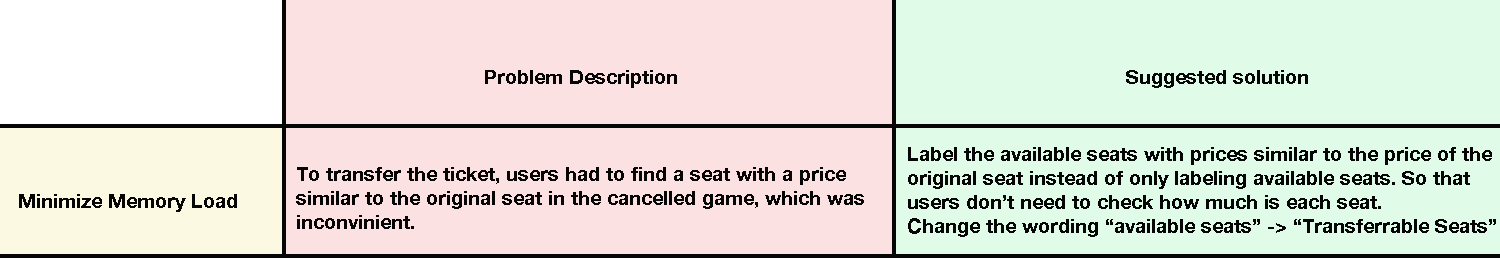
<style>
.page{position:relative;width:1500px;height:258px;background:#fbe1e2}
.page>*{position:absolute;margin:0}
.t1{font:20px "HelveticaNeue-Bold";color:#060606}
</style>
<div class="page">
<p class="t1" style="left:485px;top:70px;width:823px;height:18px">Problem Description                 Suggested solution</p>
<p class="t1" style="left:908px;top:147px;width:588px;height:90px">Label the available seats with prices similar to the price of the<br>original seat instead of only labeling available seats. So that<br>users don’t need to check how much is each seat.<br>Change the wording “available seats” -&gt; “Transferrable Seats”</p>
<p class="t1" style="left:296px;top:167px;width:568px;height:62px">To transfer the ticket, users had to find a seat with a price <br>similar to the original seat in the cancelled game, which was <br>inconvinient.</p>
<p class="t1" style="left:19px;top:194px;width:218px;height:18px">Minimize Memory Load</p>
</div>
